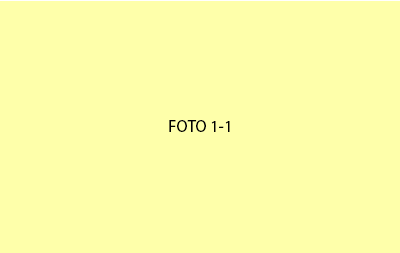
<style>
.page{position:relative;width:400px;height:253px;background:#feffaa}
.page>*{position:absolute;margin:0}
.t1{font:16.6px "MyriadPro-Regular";color:#000000}
</style>
<div class="page">
<p class="t1" style="left:169px;top:120px;width:61px;height:12px">FOTO 1-1</p>
</div>
